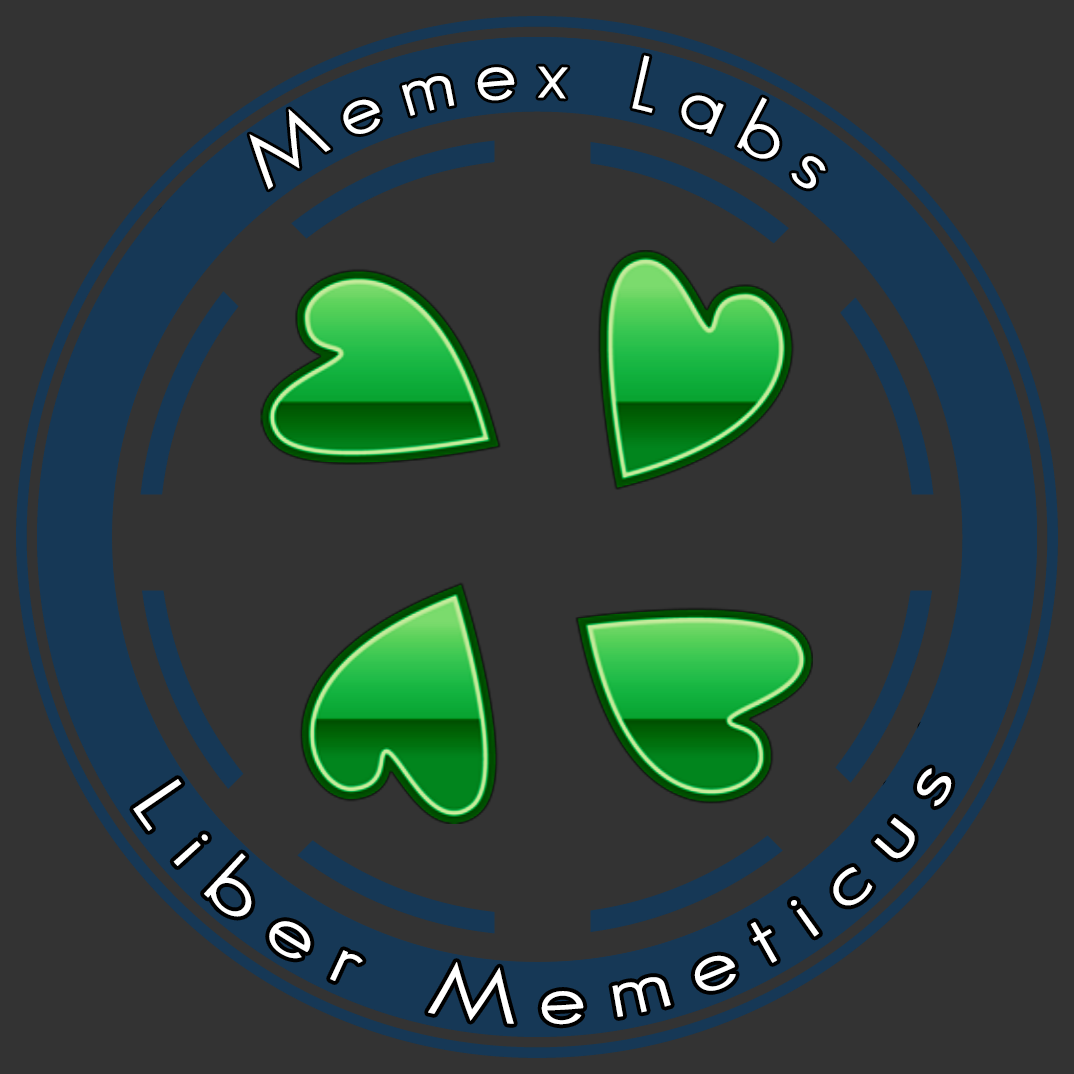
<style>
.page{position:relative;width:1074px;height:1074px;background:#333333}
.page>*{position:absolute;margin:0}
.t1{font:75px "SansSerifBookFLF";letter-spacing:0.22em;color:#ffffff}
</style>
<div class="page">
<p class="t1" style="left:249px;top:55px;width:577px;height:135px;rotate:2deg">Memex Labs</p>
<p class="t1" style="left:133px;top:768px;width:819px;height:257px;rotate:-3deg">Liber Memeticus</p>
</div>
